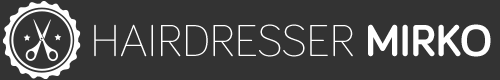
<style>
.page{position:relative;width:500px;height:80px;background:#333333}
.page>*{position:absolute;margin:0}
.t1{font:46px "Bariol-Light";letter-spacing:-0.005em;color:#ffffff;text-transform:uppercase}
.t2{font:46px "Bariol-Bold";letter-spacing:-0.005em;color:#ffffff;text-transform:uppercase}
</style>
<div class="page">
<p class="t1" style="left:94px;top:24px;width:397px;height:33px">Hairdresser <span class="t2">Mirko</span></p>
</div>
